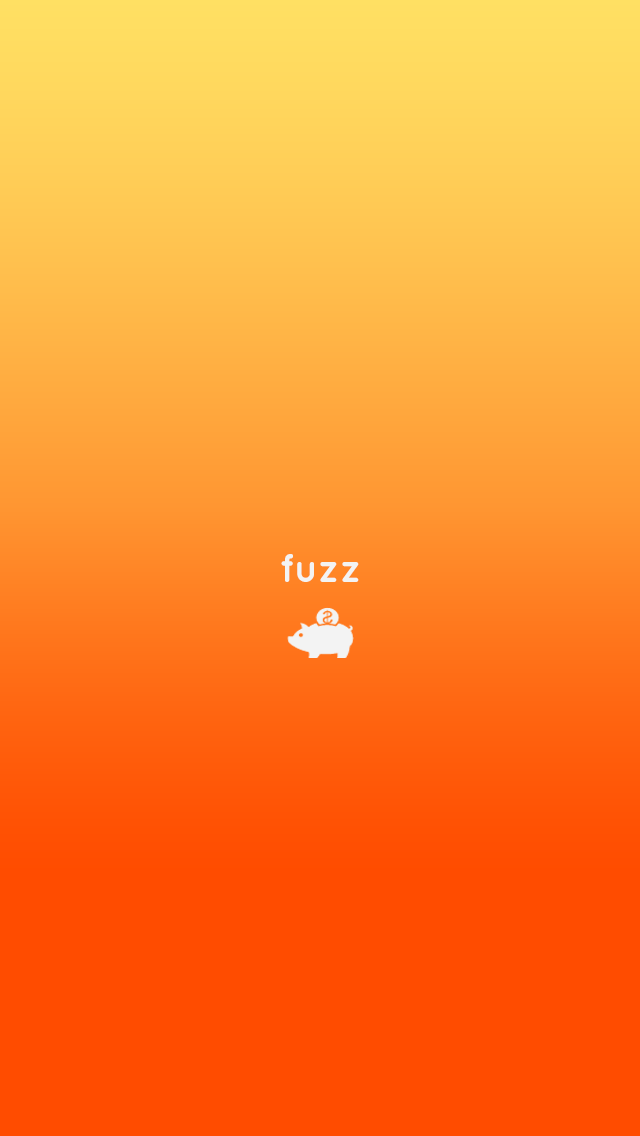
<style>
.page{position:relative;width:640px;height:1136px;background:#ff4c00}
.page>*{position:absolute;margin:0}
.t1{font:40px "Quicksand-Bold";color:#f3f3f3}
</style>
<div class="page">
<p class="t1" style="left:281px;top:554px;width:78px;height:28px">fuzz</p>
</div>
